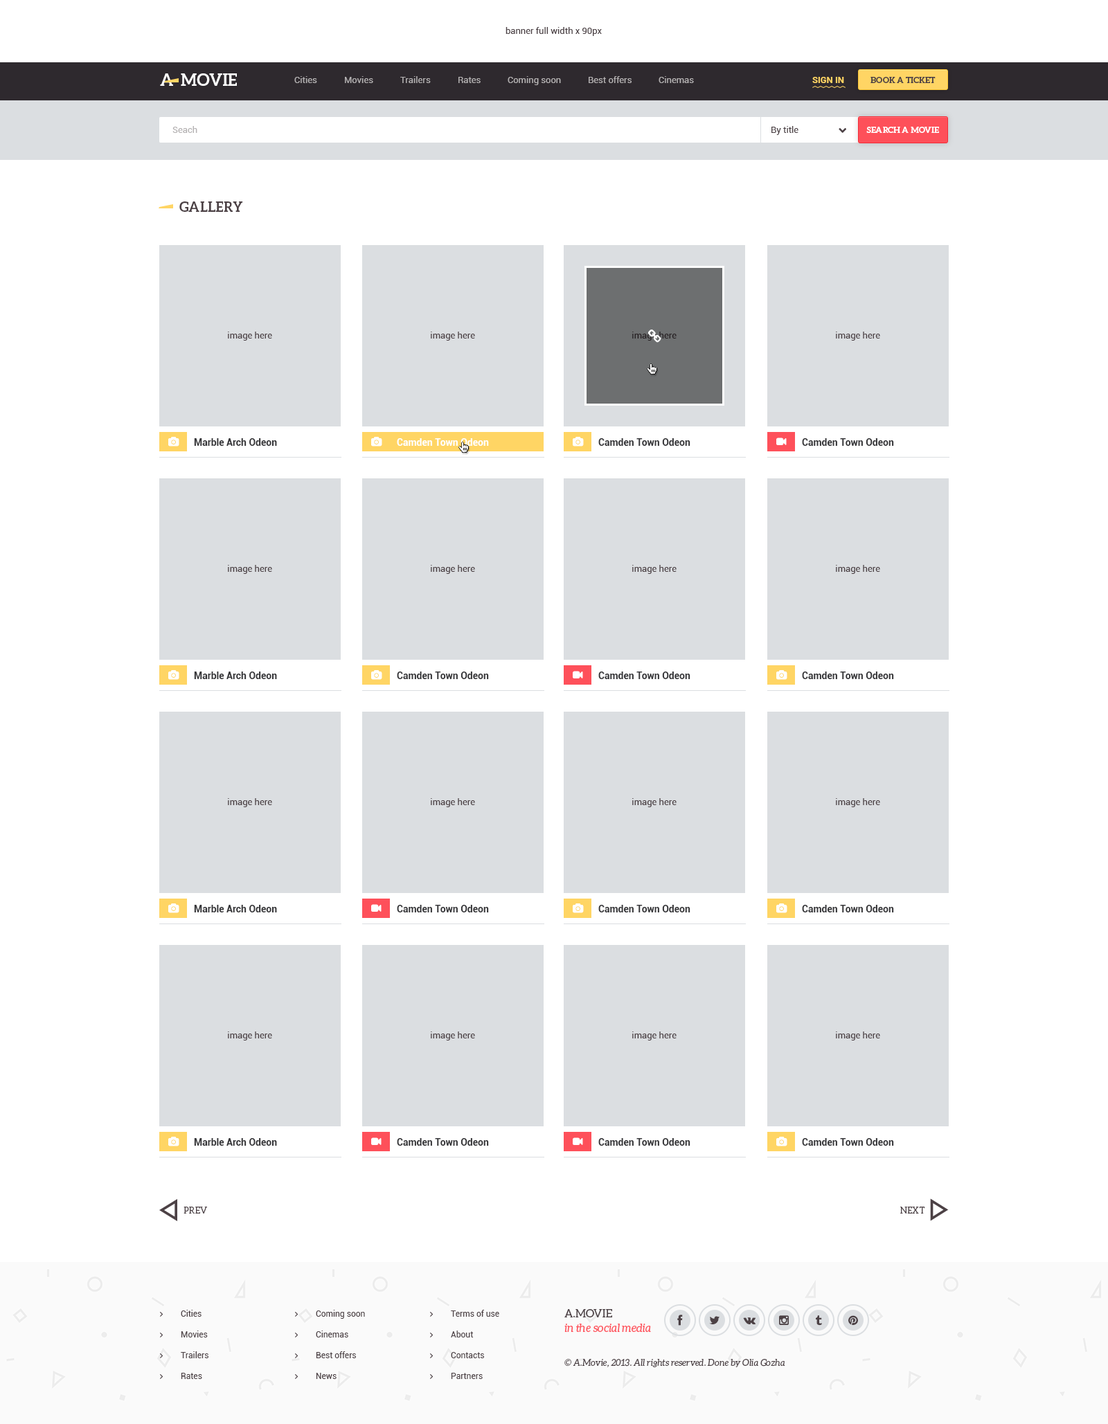
<style>
.page{position:relative;width:1108px;height:1424px;background:#ffffff}
.page>*{position:absolute;margin:0}
.t1{font:9px "Roboto-Regular";color:#4c4145}
.t2{font:16.6px "Aleo-Bold";color:#ffffff;text-transform:uppercase}
.t3{font:9px "Roboto-Regular";color:#b4b1b2}
.t4{font:9px "Roboto-Bold";color:#ffd564;text-transform:uppercase}
.t5{font:8.3px "Aleo-Bold";color:#4c4145;text-transform:uppercase}
.t6{font:8.3px "Aleo-Bold";color:#ffffff;text-transform:uppercase}
.t7{font:13.8px "Aleo-Bold";color:#4c4145;text-transform:uppercase}
.t8{font:9px "Roboto-Regular";color:#262022}
.t9{font:9.7px "Roboto-Bold";color:#363639}
.t10{font:9.7px "Roboto-Bold";color:#ffffff}
.t11{font:9px "Aleo-Regular";color:#4c4145;text-transform:uppercase}
.t12{font:8.3px "Roboto-Regular";color:#4c4145}
.t13{font:11.1px/14.5px "Aleo-Italic";color:#fe505a}
.t14{font:11.1px/14.5px "Aleo-Regular";color:#4c4145;text-transform:uppercase}
.t15{font:9px "Aleo-Italic";color:#4c4145}
</style>
<div class="page">
<p class="t1" style="left:505px;top:27px;width:97px;height:9px">banner full width x 90px</p>
<p class="t2" style="left:160px;top:73px;width:13px;height:13px">A</p>
<p class="t2" style="left:181px;top:73px;width:56px;height:13px">movie</p>
<p class="t3" style="left:294px;top:76px;width:23px;height:7px">Cities</p>
<p class="t3" style="left:345px;top:76px;width:28px;height:7px">Movies</p>
<p class="t3" style="left:400px;top:76px;width:31px;height:7px">Trailers</p>
<p class="t3" style="left:458px;top:77px;width:22px;height:6px">Rates</p>
<p class="t3" style="left:507px;top:76px;width:54px;height:9px">Coming soon</p>
<p class="t3" style="left:588px;top:76px;width:43px;height:7px">Best offers</p>
<p class="t3" style="left:658px;top:76px;width:36px;height:7px">Cinemas</p>
<p class="t4" style="left:812px;top:77px;width:32px;height:6px">Sign in</p>
<p class="t5" style="left:870px;top:77px;width:65px;height:6px">Book a ticket</p>
<p class="t3" style="left:172px;top:126px;width:25px;height:7px">Seach</p>
<p class="t1" style="left:771px;top:126px;width:27px;height:9px">By title</p>
<p class="t6" style="left:866px;top:127px;width:73px;height:6px">search a movie</p>
<p class="t7" style="left:179px;top:201px;width:64px;height:11px">gallery</p>
<p class="t1" style="left:228px;top:332px;width:44px;height:9px">image here</p>
<p class="t1" style="left:431px;top:332px;width:44px;height:9px">image here</p>
<p class="t8" style="left:632px;top:332px;width:44px;height:9px">image here</p>
<p class="t1" style="left:836px;top:332px;width:44px;height:9px">image here</p>
<p class="t9" style="left:194px;top:438px;width:83px;height:8px">Marble Arch Odeon</p>
<p class="t10" style="left:397px;top:438px;width:92px;height:8px">Camden Town Odeon</p>
<p class="t9" style="left:598px;top:438px;width:92px;height:8px">Camden Town Odeon</p>
<p class="t9" style="left:802px;top:438px;width:92px;height:8px">Camden Town Odeon</p>
<p class="t1" style="left:228px;top:565px;width:44px;height:9px">image here</p>
<p class="t1" style="left:431px;top:565px;width:44px;height:9px">image here</p>
<p class="t1" style="left:632px;top:565px;width:44px;height:9px">image here</p>
<p class="t1" style="left:836px;top:565px;width:44px;height:9px">image here</p>
<p class="t9" style="left:194px;top:672px;width:83px;height:7px">Marble Arch Odeon</p>
<p class="t9" style="left:397px;top:672px;width:92px;height:7px">Camden Town Odeon</p>
<p class="t9" style="left:598px;top:672px;width:92px;height:7px">Camden Town Odeon</p>
<p class="t9" style="left:802px;top:672px;width:92px;height:7px">Camden Town Odeon</p>
<p class="t1" style="left:228px;top:798px;width:44px;height:9px">image here</p>
<p class="t1" style="left:431px;top:798px;width:44px;height:9px">image here</p>
<p class="t1" style="left:632px;top:798px;width:44px;height:9px">image here</p>
<p class="t1" style="left:836px;top:798px;width:44px;height:9px">image here</p>
<p class="t9" style="left:194px;top:905px;width:83px;height:7px">Marble Arch Odeon</p>
<p class="t9" style="left:397px;top:905px;width:92px;height:7px">Camden Town Odeon</p>
<p class="t9" style="left:598px;top:905px;width:92px;height:7px">Camden Town Odeon</p>
<p class="t9" style="left:802px;top:905px;width:92px;height:7px">Camden Town Odeon</p>
<p class="t1" style="left:228px;top:1032px;width:44px;height:9px">image here</p>
<p class="t1" style="left:431px;top:1032px;width:44px;height:9px">image here</p>
<p class="t1" style="left:632px;top:1032px;width:44px;height:9px">image here</p>
<p class="t1" style="left:836px;top:1032px;width:44px;height:9px">image here</p>
<p class="t9" style="left:194px;top:1138px;width:83px;height:8px">Marble Arch Odeon</p>
<p class="t9" style="left:397px;top:1138px;width:92px;height:8px">Camden Town Odeon</p>
<p class="t9" style="left:598px;top:1138px;width:92px;height:8px">Camden Town Odeon</p>
<p class="t9" style="left:802px;top:1138px;width:92px;height:8px">Camden Town Odeon</p>
<p class="t11" style="left:183px;top:1207px;width:24px;height:7px">prev</p>
<p class="t11" style="left:900px;top:1207px;width:25px;height:7px">next</p>
<p class="t12" style="left:181px;top:1310px;width:20px;height:7px">Cities</p>
<p class="t12" style="left:316px;top:1310px;width:49px;height:9px">Coming soon</p>
<p class="t12" style="left:451px;top:1310px;width:48px;height:7px">Terms of use</p>
<p class="t13" style="left:564px;top:1309px;width:87px;height:24px"><span class="t14">A.Movie <br></span>in the social media</p>
<p class="t12" style="left:181px;top:1331px;width:27px;height:7px">Movies</p>
<p class="t12" style="left:316px;top:1331px;width:32px;height:7px">Cinemas</p>
<p class="t12" style="left:451px;top:1331px;width:23px;height:7px">About</p>
<p class="t12" style="left:181px;top:1351px;width:27px;height:7px">Trailers</p>
<p class="t12" style="left:316px;top:1351px;width:40px;height:7px">Best offers</p>
<p class="t12" style="left:451px;top:1352px;width:33px;height:6px">Contacts</p>
<p class="t15" style="left:564px;top:1359px;width:221px;height:8px">© A.Movie, 2013. All rights reserved. Done by Olia Gozha</p>
<p class="t12" style="left:181px;top:1373px;width:21px;height:6px">Rates</p>
<p class="t12" style="left:316px;top:1373px;width:20px;height:6px">News</p>
<p class="t12" style="left:451px;top:1373px;width:32px;height:6px">Partners</p>
</div>
